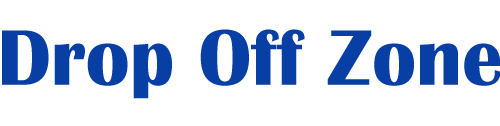
<style>
.page{position:relative;width:500px;height:126px;background:#ffffff}
.page>*{position:absolute;margin:0}
.t1{font:81.6px "BritannicBold";color:#083fa5}
</style>
<div class="page">
<p class="t1" style="left:2px;top:29px;width:499px;height:70px">Drop Off Zone</p>
</div>
